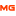
<style>
.page{position:relative;width:16px;height:16px;background:#ffffff}
.page>*{position:absolute;margin:0}
.t1{font:10.7px "Bitsumishi";letter-spacing:0.06em;color:#ff3c00}
</style>
<div class="page">
<p class="t1" style="left:0px;top:5px;width:15px;height:6px">MG</p>
</div>
